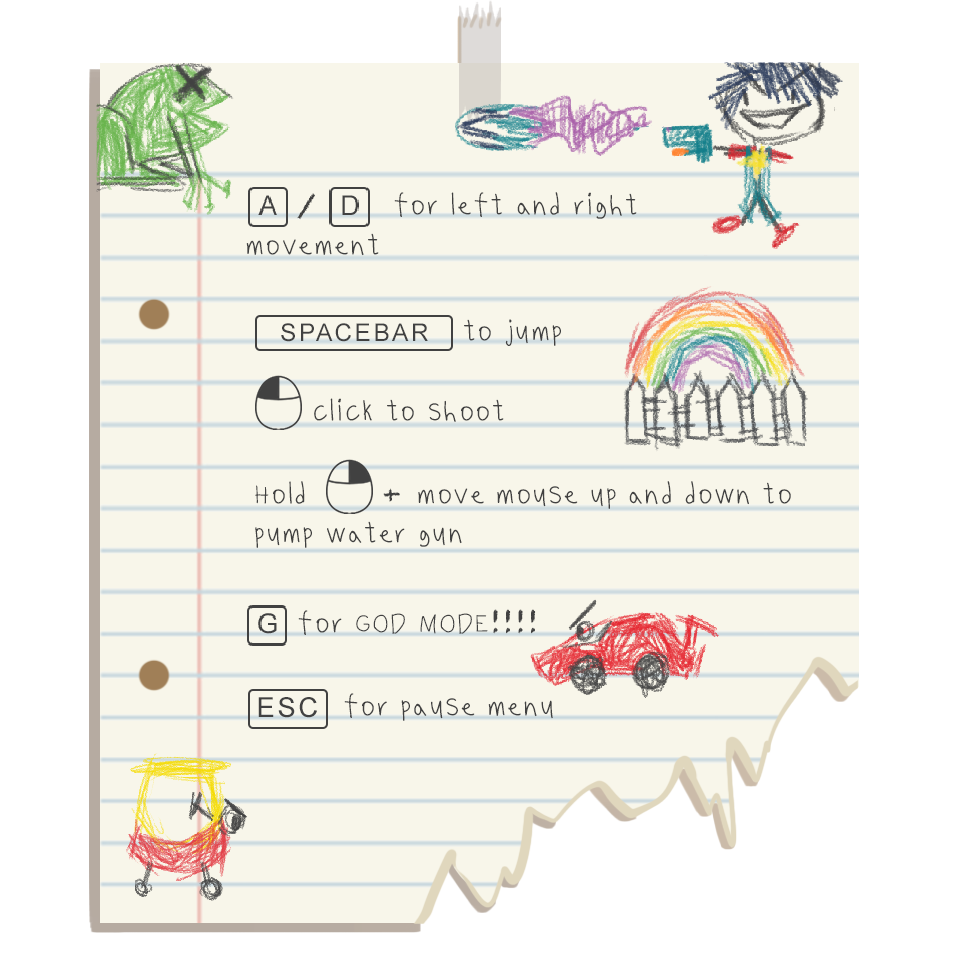
<style>
.page{position:relative;width:971px;height:961px;background:#f8f6ea}
.page>*{position:absolute;margin:0}
.t1{font:27.5px/39.7px "Benjammin'-Medium";letter-spacing:0.1em;color:#414141}
.t2{font:27.5px/39.7px "Chalkduster";letter-spacing:0.1em;color:#414141}
.t3{font:27.5px "Chalkduster";letter-spacing:0.1em;color:#414141}
.t4{font:24.4px "ArialMT";letter-spacing:0.1em;color:#414141}
.t5{font:27.5px "Benjammin'-Medium";letter-spacing:0.1em;color:#414141}
.t6{font:27.4px "ArialMT";letter-spacing:0.1em;color:#414141}
</style>
<div class="page">
<p class="t1" style="left:246px;top:192px;width:391px;height:64px;text-align:justify"><span class="t2">         </span>for left and right <br>movement</p>
<p class="t3" style="left:297px;top:193px;width:18px;height:27px">/</p>
<p class="t4" style="left:281px;top:323px;width:147px;height:19px">SPACEBAR</p>
<p class="t5" style="left:464px;top:319px;width:97px;height:27px">to jump</p>
<p class="t5" style="left:314px;top:398px;width:190px;height:24px">click to shoot</p>
<p class="t1" style="left:255px;top:481px;width:536px;height:67px;text-align:justify">Hold<span class="t2">     + </span>move mouse up and down to pump water gun</p>
<p class="t5" style="left:298px;top:609px;width:238px;height:26px"><span class="t3"> </span>for GOD MODE<span class="t3">!!!!</span></p>
<p class="t6" style="left:258px;top:697px;width:59px;height:21px">ESC</p>
<p class="t5" style="left:344px;top:693px;width:209px;height:28px"><span class="t3"> </span>for pause menu</p>
</div>
